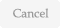
<style>
.page{position:relative;width:60px;height:28px;background:#f5f5f5}
.page>*{position:absolute;margin:0}
.t1{font:12px "BookAntiqua";color:#999999}
</style>
<div class="page">
<p class="t1" style="left:13px;top:8px;width:36px;height:10px">Cancel</p>
</div>
